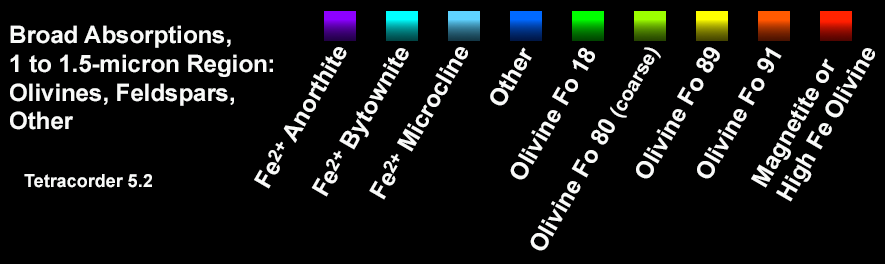
<style>
.page{position:relative;width:885px;height:264px;background:#000000}
.page>*{position:absolute;margin:0}
.t1{font:24px "Arial-BoldMT";color:#f9faf9}
.t2{font:18px "Arial-BoldMT";color:#f9faf9}
.t3{font:20px "Arial-BoldMT";color:#f9faf9}
</style>
<div class="page">
<p class="t1" style="left:10px;top:25px;width:263px;height:163px">Broad Absorptions,<br>1 to 1.5-micron Region:<br>Olivines, Feldspars,<br>Other<br><br><br><br><span class="t2">   Tetracorder 5.2</span></p>
<p class="t1" style="left:254px;top:47px;width:93px;height:142px;rotate:-60deg">Fe<span class="t2">2+</span> Anorthite</p>
<p class="t1" style="left:311px;top:48px;width:98px;height:149px;rotate:-60deg">Fe<span class="t2">2+</span> Bytownite</p>
<p class="t1" style="left:369px;top:47px;width:99px;height:153px;rotate:-60deg">Fe<span class="t2">2+</span> Microcline</p>
<p class="t1" style="left:490px;top:47px;width:42px;height:59px;rotate:-60deg">Other</p>
<p class="t1" style="left:510px;top:47px;width:85px;height:133px;rotate:-60deg">Olivine Fo 18</p>
<p class="t1" style="left:530px;top:47px;width:131px;height:204px;rotate:-60deg">Olivine Fo 80 <span class="t3">(coarse)</span></p>
<p class="t1" style="left:636px;top:47px;width:84px;height:132px;rotate:-60deg">Olivine Fo 89</p>
<p class="t1" style="left:697px;top:47px;width:85px;height:132px;rotate:-60deg">Olivine Fo 91</p>
<p class="t1" style="left:751px;top:48px;width:124px;height:154px;rotate:-60deg">Magnetite or<br>High Fe Olivine</p>
</div>
